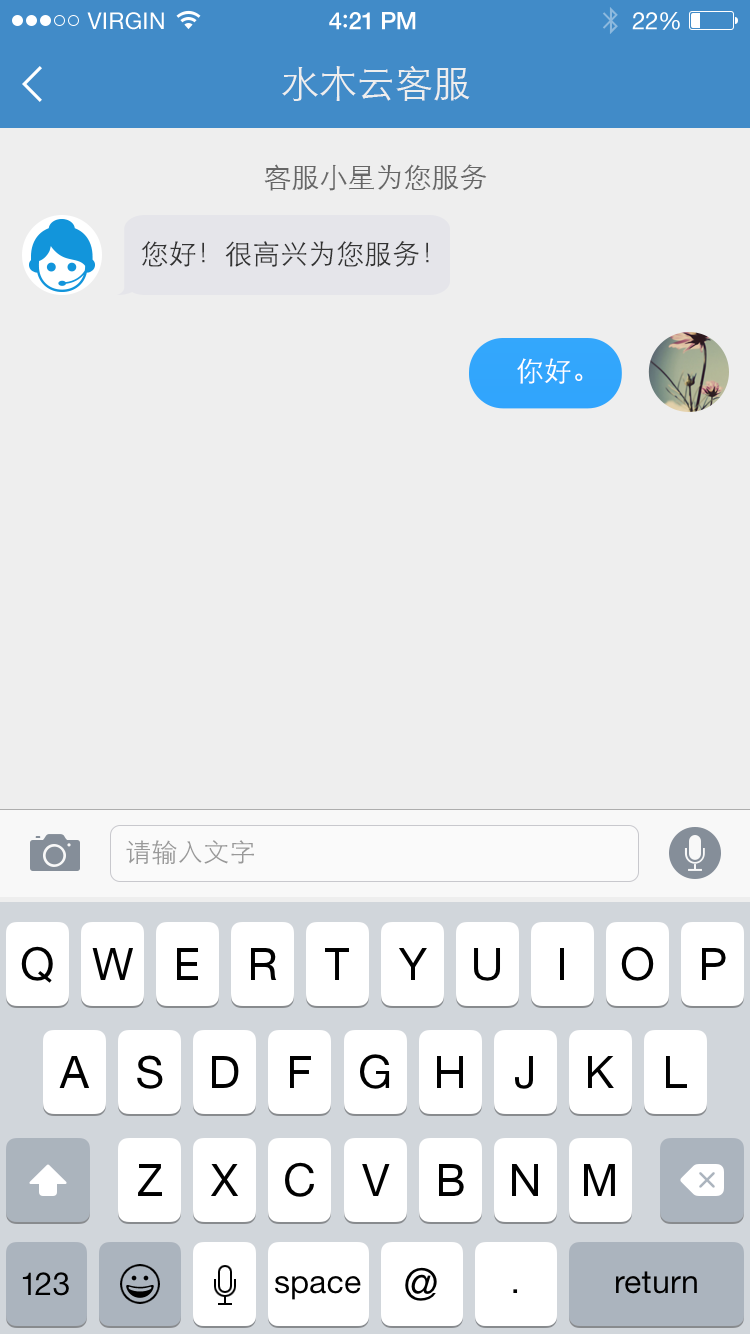
<style>
.page{position:relative;width:750px;height:1334px;background:#eeeeee}
.page>*{position:absolute;margin:0}
.t1{font:23px "HelveticaNeue";letter-spacing:0.02em;color:#ffffff}
.t2{font:24px "HelveticaNeue-Medium";letter-spacing:-0.02em;color:#ffffff}
.t3{font:26px "Avenir-Medium";letter-spacing:-0.02em;color:#ffffff}
.t4{font:24px "HelveticaNeue";letter-spacing:-0.02em;color:#ffffff}
.t5{font:38px "STXihei";color:#eeeeee}
.t6{font:28px "STXihei";color:#666666}
.t7{font:28px "STXihei";color:#333333}
.t8{font:28px "STXihei";color:#ffffff}
.t9{font:26px "STXihei";color:#999999}
</style>
<div class="page">
<p class="t1" style="left:87px;top:12px;width:77px;height:18px">VIRGIN</p>
<p class="t2" style="left:329px;top:12px;width:87px;height:18px">4<span class="t3">:</span>21 PM</p>
<p class="t4" style="left:632px;top:12px;width:48px;height:18px">22%</p>
<p class="t5" style="left:282px;top:66px;width:188px;height:35px">水木云客服</p>
<p class="t6" style="left:264px;top:164px;width:223px;height:27px">客服小星为您服务</p>
<p class="t7" style="left:141px;top:241px;width:288px;height:26px">您好！很高兴为您服务！</p>
<p class="t8" style="left:517px;top:358px;width:66px;height:26px">你好。</p>
<p class="t9" style="left:126px;top:840px;width:128px;height:25px">请输入文字</p>
</div>
